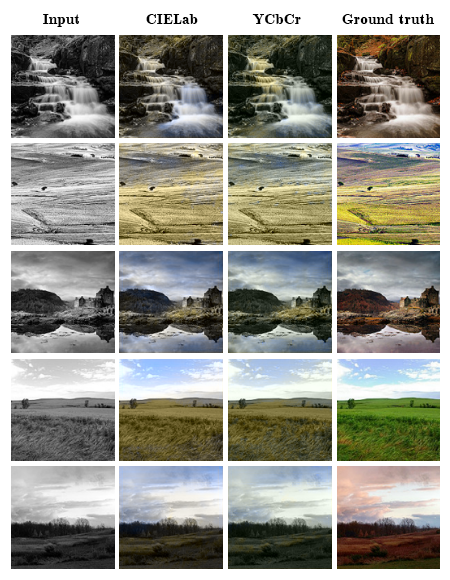
<style>
.page{position:relative;width:450px;height:580px}
.page>*{position:absolute;margin:0}
.t1{font:15.3px "Cmb10";color:#000000}
</style>
<div class="page">
<p class="t1" style="left:43px;top:14px;width:36px;height:13px">Input</p>
<p class="t1" style="left:146px;top:14px;width:52px;height:10px">CIELab</p>
<p class="t1" style="left:252px;top:14px;width:49px;height:10px">YCbCr</p>
<p class="t1" style="left:342px;top:14px;width:93px;height:10px">Ground truth</p>
</div>
